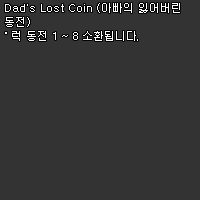
<style>
.page{position:relative;width:200px;height:200px;background:#333333}
.page>*{position:absolute;margin:0}
.t1{font:11px/14px "Dotum";color:#ffffff}
</style>
<div class="page">
<p class="t1" style="left:5px;top:3px;width:175px;height:38px">Dad's Lost Coin (아빠의 잃어버린<br>동전)<br>˚ 럭 동전 1 ~ 8 소환됩니다.</p>
</div>
